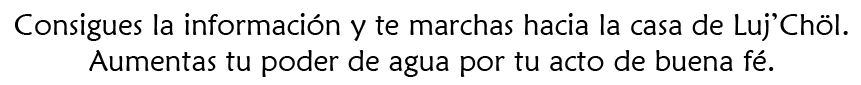
<style>
.page{position:relative;width:861px;height:85px;background:#ffffff}
.page>*{position:absolute;margin:0}
.t1{font:30px "MaiandraGD-Regular";color:#000000}
</style>
<div class="page">
<p class="t1" style="left:15px;top:13px;width:833px;height:64px;text-align:center">Consigues la información y te marchas hacia la casa de Luj’Chöl.<br>Aumentas tu poder de agua por tu acto de buena fé.</p>
</div>
